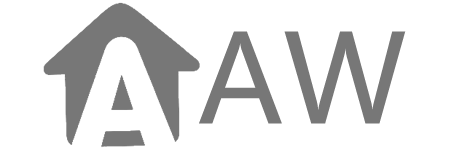
<style>
.page{position:relative;width:450px;height:150px;background:#ffffff}
.page>*{position:absolute;margin:0}
.t1{font:121.3px "MicrosoftYaHei";color:#777777}
</style>
<div class="page">
<p class="t1" style="left:199px;top:31px;width:207px;height:93px">AW</p>
</div>
